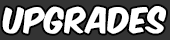
<style>
.page{position:relative;width:170px;height:40px;background:#ffffff}
.page>*{position:absolute;margin:0}
.t1{font:30px "KomikaAxis";color:#ffffff}
</style>
<div class="page">
<p class="t1" style="left:2px;top:6px;width:164px;height:28px">upgrades</p>
</div>
